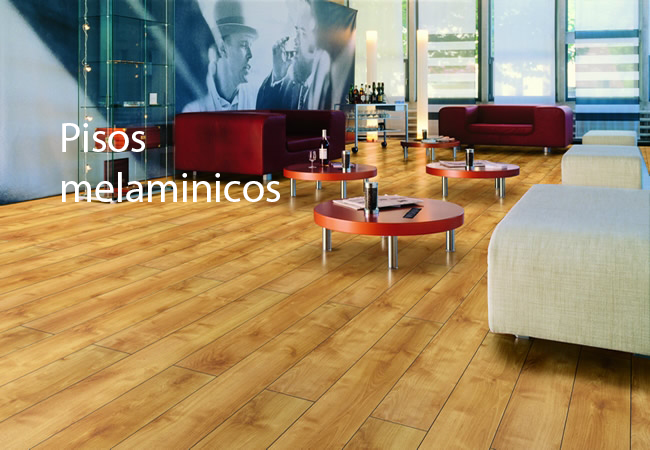
<style>
.page{position:relative;width:650px;height:450px}
.page>*{position:absolute;margin:0}
.t1{font:42px "MyriadPro-Regular";color:#ffffff}
</style>
<div class="page">
<p class="t1" style="left:61px;top:123px;width:219px;height:79px">Pisos <br>melaminicos</p>
</div>
